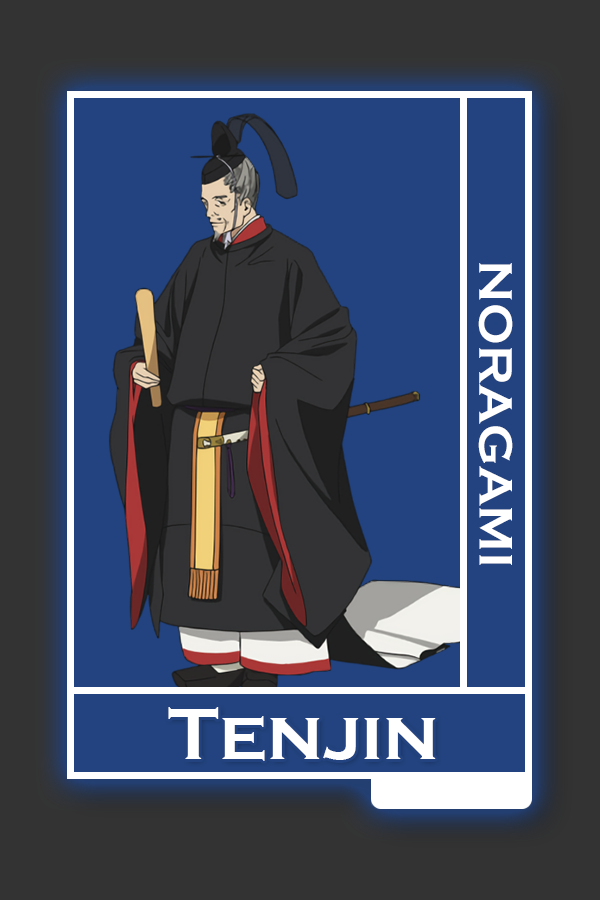
<style>
.page{position:relative;width:600px;height:900px;background:#22437f}
.page>*{position:absolute;margin:0}
.t1{font:48.8px "CopperplateGothic-Bold";color:#ffffff}
.t2{font:75px "CopperplateGothic-Bold";color:#ffffff}
</style>
<div class="page">
<p class="t1" style="left:478px;top:263px;width:35px;height:302px;rotate:90deg">NORAGAMI</p>
<p class="t2" style="left:168px;top:707px;width:268px;height:54px">Tenjin</p>
</div>
